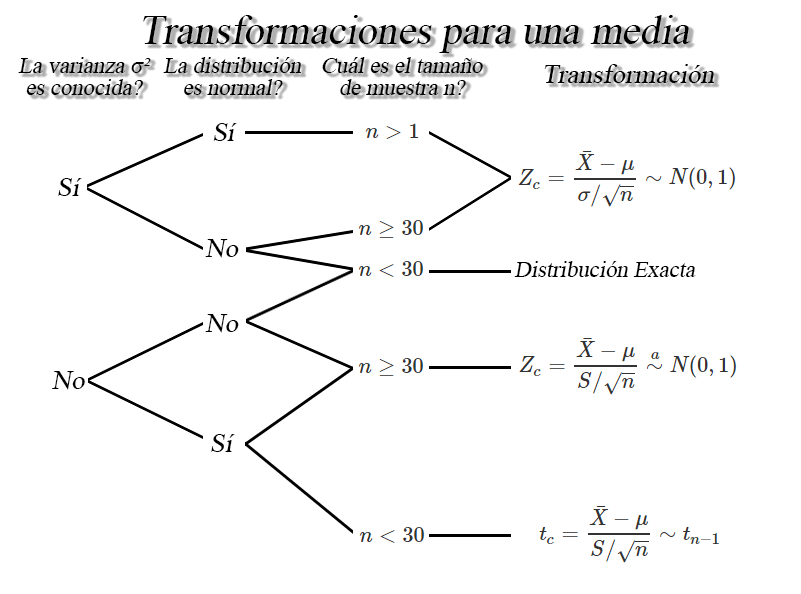
<style>
.page{position:relative;width:801px;height:594px;background:#ffffff}
.page>*{position:absolute;margin:0}
.t1{font:30.5px "TimesNewRomanPSMT";color:#000000;font-style:italic}
.t2{font:17px/21.7px "TimesNewRomanPSMT";color:#000000;font-style:italic}
.t3{font:20.4px "TimesNewRomanPSMT";color:#000000;font-style:italic}
.t4{font:26.7px "TimesNewRomanPSMT";color:#000000;font-style:italic}
.t5{font:17px "TimesNewRomanPSMT";color:#000000;font-style:italic}
</style>
<div class="page">
<p class="t1" style="left:143px;top:15px;width:547px;height:38px">Transformaciones para una media</p>
<p class="t2" style="left:18px;top:57px;width:133px;height:38px;text-align:center">La varianza σ²<br>es conocida?</p>
<p class="t2" style="left:163px;top:57px;width:138px;height:38px;text-align:center">La distribución<br>es normal?</p>
<p class="t2" style="left:322px;top:57px;width:161px;height:38px;text-align:center">Cuál es el tamaño<br>de muestra n?</p>
<p class="t3" style="left:544px;top:64px;width:170px;height:19px">Transformación</p>
<p class="t4" style="left:213px;top:123px;width:24px;height:18px">Sí</p>
<p class="t4" style="left:58px;top:178px;width:24px;height:18px">Sí</p>
<p class="t4" style="left:205px;top:239px;width:34px;height:19px">No</p>
<p class="t5" style="left:514px;top:261px;width:182px;height:16px">Distribución Exacta</p>
<p class="t4" style="left:205px;top:314px;width:34px;height:19px">No</p>
<p class="t4" style="left:52px;top:371px;width:33px;height:19px">No</p>
<p class="t4" style="left:211px;top:434px;width:24px;height:18px">Sí</p>
</div>
